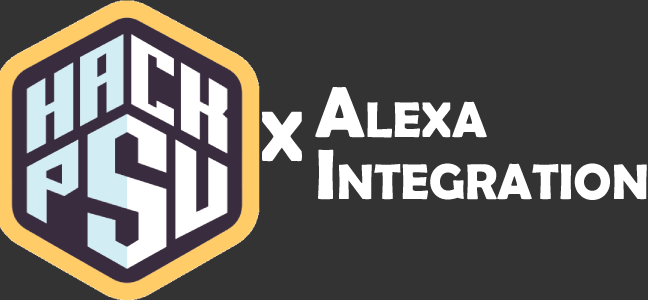
<style>
.page{position:relative;width:648px;height:300px;background:#333333}
.page>*{position:absolute;margin:0}
.t1{font:72px "BerlinSansFBDemi-Bold";color:#ffffff;font-variant:small-caps}
</style>
<div class="page">
<p class="t1" style="left:315px;top:87px;width:172px;height:51px">Alexa</p>
<p class="t1" style="left:262px;top:111px;width:40px;height:51px">X</p>
<p class="t1" style="left:318px;top:149px;width:329px;height:51px">Integration</p>
</div>
